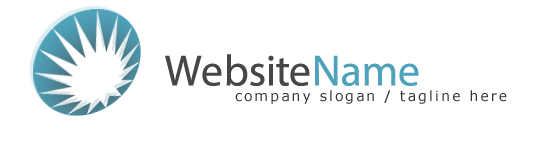
<style>
.page{position:relative;width:550px;height:150px;background:#ffffff}
.page>*{position:absolute;margin:0}
.t1{font:44px "MyriadPro-Regular";color:#464646}
.t2{font:44px "MyriadPro-Regular";color:#4ea2ba}
.t3{font:14px "Verdana";letter-spacing:0.15em;color:#333333}
</style>
<div class="page">
<p class="t1" style="left:165px;top:54px;width:254px;height:32px">Website<span class="t2">Name</span></p>
<p class="t3" style="left:235px;top:90px;width:272px;height:14px">company slogan / tagline here</p>
</div>
